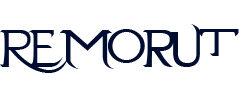
<style>
.page{position:relative;width:239px;height:98px;background:#ffffff}
.page>*{position:absolute;margin:0}
.t1{font:94.7px "Evanescent";letter-spacing:-0.06em;color:#010c31}
</style>
<div class="page">
<p class="t1" style="left:0px;top:24px;width:239px;height:49px">Remorut</p>
</div>
